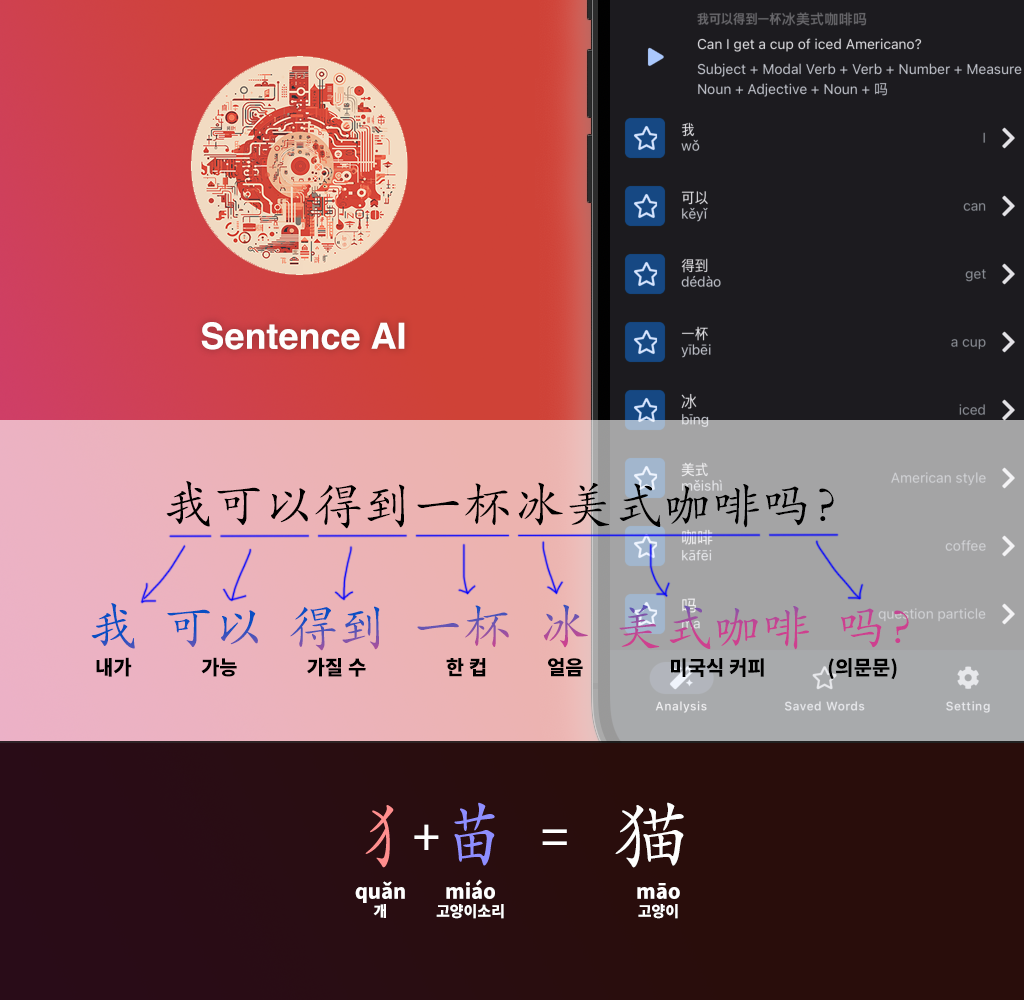
<style>
.page{position:relative;width:1024px;height:1000px}
.page>*{position:absolute;margin:0}
.t1{font:36px "Helvetica-Bold";color:#fefefe}
.t2{font:50px "STKaitiSC-Regular";color:#000000}
.t3{font:50px "STKaitiSC-Regular"}
.t4{font:20px "NotoSansCJKkr-Black";color:#000000}
.t5{font:80px "STKaiti";color:#fefefe}
.t6{font:50px "NotoSansCJKkr-Regular";color:#ffffff}
.t7{font:20px "NotoSansCJKkr-Black";color:#ffffff}
.t8{font:15px "NotoSansCJKkr-Black";color:#ffffff}
</style>
<div class="page">
<p class="t1" style="left:201px;top:322px;width:204px;height:28px">Sentence AI</p>
<p class="t2" style="left:166px;top:481px;width:668px;height:48px">我可以得到一杯冰美式咖啡吗？</p>
<p class="t3" style="left:91px;top:603px;width:818px;height:48px">我  可以  得到  一杯  冰  美式咖啡  吗？</p>
<p class="t4" style="left:96px;top:657px;width:36px;height:20px">내가</p>
<p class="t4" style="left:201px;top:657px;width:36px;height:20px">가능</p>
<p class="t4" style="left:307px;top:657px;width:59px;height:20px">가질 수</p>
<p class="t4" style="left:446px;top:658px;width:40px;height:19px">한 컵</p>
<p class="t4" style="left:548px;top:658px;width:35px;height:19px">얼음</p>
<p class="t4" style="left:671px;top:658px;width:93px;height:19px">미국식 커피</p>
<p class="t4" style="left:828px;top:658px;width:69px;height:22px">(의문문)</p>
<p class="t5" style="left:615px;top:802px;width:69px;height:66px">猫</p>
<p class="t6" style="left:414px;top:824px;width:153px;height:26px">+         =</p>
<p class="t7" style="left:355px;top:881px;width:50px;height:37px;text-align:center">quǎn<br><span class="t8">개</span></p>
<p class="t8" style="left:436px;top:879px;width:68px;height:40px;text-align:center"><span class="t7">miáo<br></span>고양이소리</p>
<p class="t7" style="left:637px;top:883px;width:43px;height:36px;text-align:center">māo<br><span class="t8">고양이</span></p>
</div>
